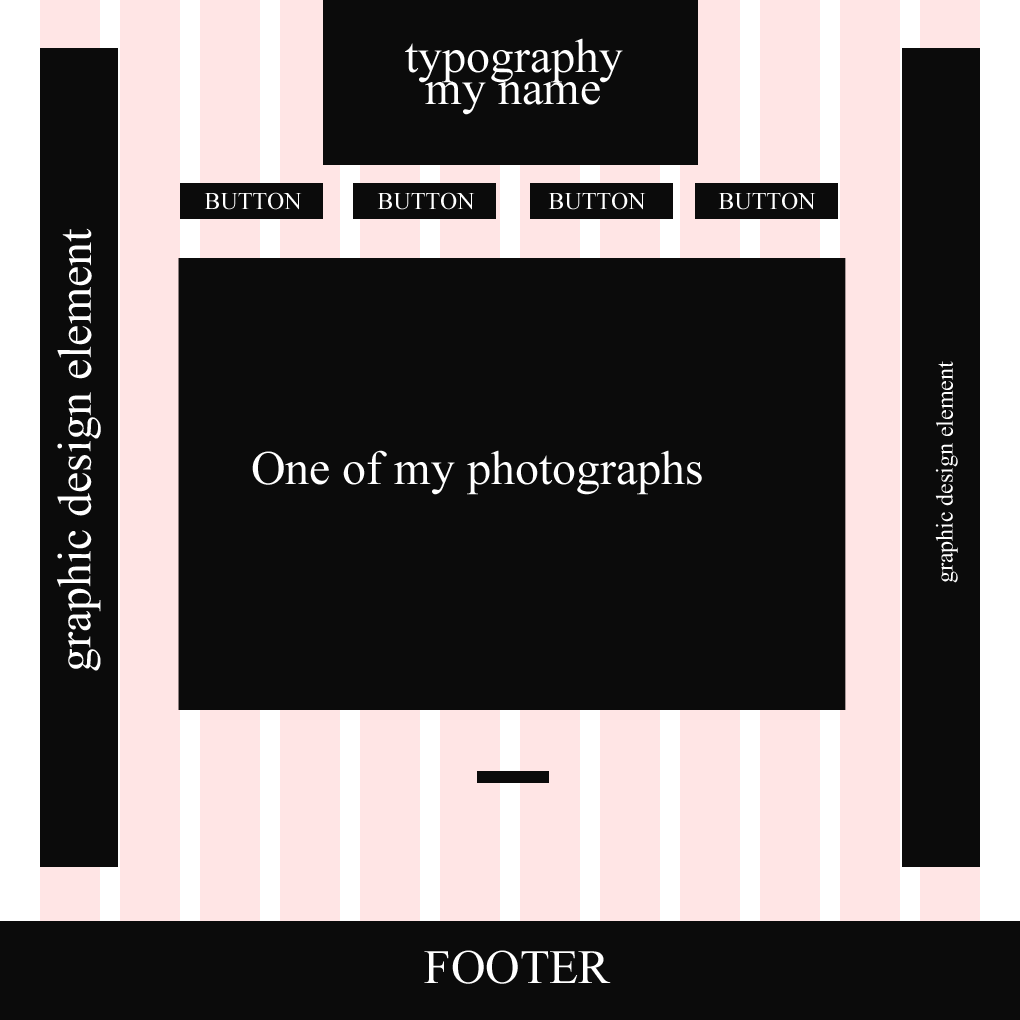
<style>
.page{position:relative;width:1020px;height:1020px;background:#0b0b0b}
.page>*{position:absolute;margin:0}
.t1{font:47.8px "TimesNewRomanPSMT";color:#ffffff}
.t2{font:23.9px "TimesNewRomanPSMT";color:#ffffff}
</style>
<div class="page">
<p class="t1" style="left:405px;top:38px;width:218px;height:45px">typography</p>
<p class="t1" style="left:425px;top:82px;width:175px;height:33px">my name</p>
<p class="t2" style="left:204px;top:192px;width:98px;height:18px">BUTTON</p>
<p class="t2" style="left:377px;top:192px;width:98px;height:18px">BUTTON</p>
<p class="t2" style="left:548px;top:192px;width:98px;height:18px">BUTTON</p>
<p class="t2" style="left:718px;top:192px;width:98px;height:18px">BUTTON</p>
<p class="t1" style="left:57px;top:228px;width:44px;height:443px;rotate:-90deg">graphic design element</p>
<p class="t2" style="left:935px;top:361px;width:23px;height:222px;rotate:-90deg">graphic design element</p>
<p class="t1" style="left:252px;top:450px;width:450px;height:45px">One of my photographs</p>
<p class="t1" style="left:424px;top:950px;width:187px;height:34px">FOOTER</p>
</div>
